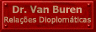
<style>
.page{position:relative;width:96px;height:32px}
.page>*{position:absolute;margin:0}
.t1{font:7.6px/9.3px "Verdana";letter-spacing:-0.04em;color:#bd9473;font-weight:bold}
.t2{font:8.9px/9.3px "Verdana-Bold";color:#bd9473}
</style>
<div class="page">
<p class="t1" style="left:4px;top:6px;width:87px;height:18px;text-align:center"><span class="t2">Dr. Van Buren<br></span>Relações Dioplomáticas</p>
</div>
